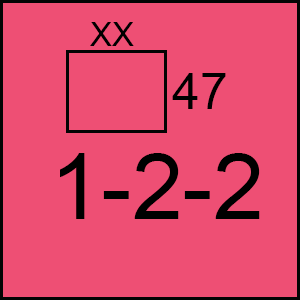
<style>
.page{position:relative;width:300px;height:300px;background:#ee4f74}
.page>*{position:absolute;margin:0}
.t1{font:33.3px "ArialMT";color:#000000}
.t2{font:50px "ArialMT";color:#000000}
.t3{font:91.7px "ArialMT";color:#000000}
</style>
<div class="page">
<p class="t1" style="left:90px;top:22px;width:44px;height:24px">XX</p>
<p class="t2" style="left:172px;top:73px;width:54px;height:36px">47</p>
<p class="t3" style="left:60px;top:153px;width:200px;height:66px">1-2-2</p>
</div>
